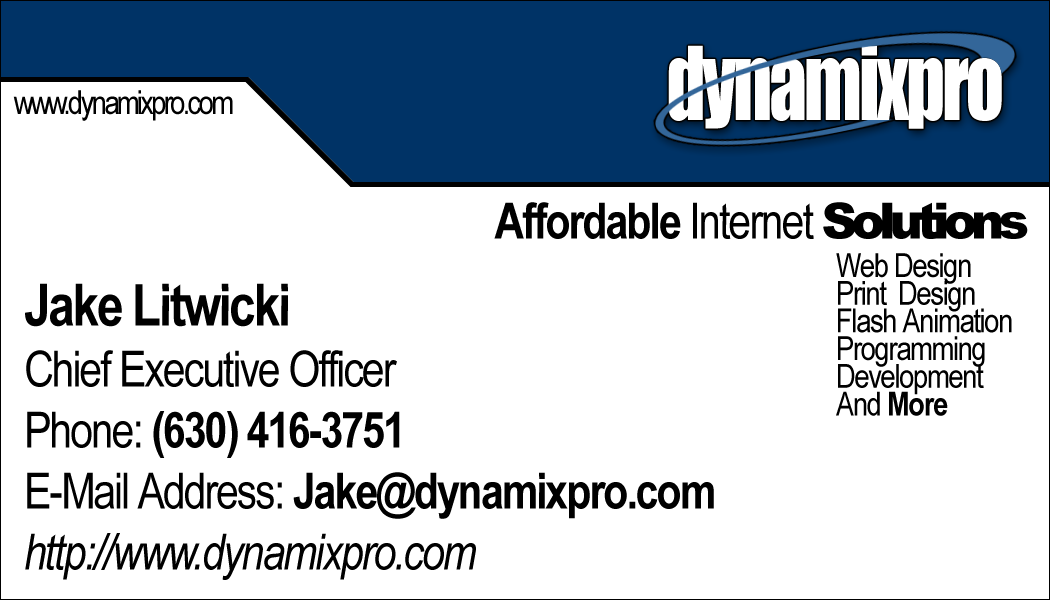
<style>
.page{position:relative;width:1050px;height:600px;background:#ffffff}
.page>*{position:absolute;margin:0}
.t1{font:33.3px "ArialNarrow";letter-spacing:-0.08em;color:#000000}
.t2{font:50px "ArialNarrow-Bold";letter-spacing:-0.04em;color:#000000}
.t3{font:50px "ArialNarrow";letter-spacing:-0.04em;color:#000000}
.t4{font:50px "Arial-Black";letter-spacing:-0.12em;color:#000000}
.t5{font:33.3px/27.7px "ArialNarrow";letter-spacing:-0.04em;color:#000000}
.t6{font:33.3px/36px "ArialNarrow";letter-spacing:-0.04em;color:#000000}
.t7{font:33.3px/27.7px "ArialNarrow-Bold";letter-spacing:-0.04em;color:#000000}
.t8{font:50px/61px "ArialNarrow";letter-spacing:-0.04em;color:#000000}
.t9{font:58.3px/61px "ArialNarrow-Bold";letter-spacing:-0.04em;color:#000000}
.t10{font:50px/61px "ArialNarrow-Bold";letter-spacing:-0.04em;color:#000000}
.t11{font:50px/61px "ArialNarrow-Italic";letter-spacing:-0.04em;color:#000000}
</style>
<div class="page">
<p class="t1" style="left:13px;top:90px;width:220px;height:31px">www.dynamixpro.com</p>
<p class="t2" style="left:494px;top:202px;width:534px;height:37px">Affordable <span class="t3">Internet </span><span class="t4">Solutions</span></p>
<p class="t5" style="left:836px;top:253px;width:176px;height:163px"><span class="t6">Web Design<br></span>Print  Design<br>Flash Animation<br>Programming<br>Development<br>And <span class="t7">More</span></p>
<p class="t8" style="left:25px;top:283px;width:689px;height:297px"><span class="t9">Jake Litwicki<br></span>Chief Executive Officer<br>Phone: <span class="t10">(630) 416-3751<br></span>E-Mail Address: <span class="t10">Jake@dynamixpro.com<br></span><span class="t11">http://www.dynamixpro.com</span></p>
</div>
